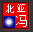
<style>
.page{position:relative;width:33px;height:32px;background:#f20000}
.page>*{position:absolute;margin:0}
.t1{font:10.4px "SimSun";color:#ffffff}
.t2{font:11.7px "SimSun";color:#ffffff}
</style>
<div class="page">
<p class="t1" style="left:6px;top:4px;width:19px;height:9px">北亚</p>
<p class="t2" style="left:16px;top:15px;width:11px;height:12px">冯</p>
</div>
